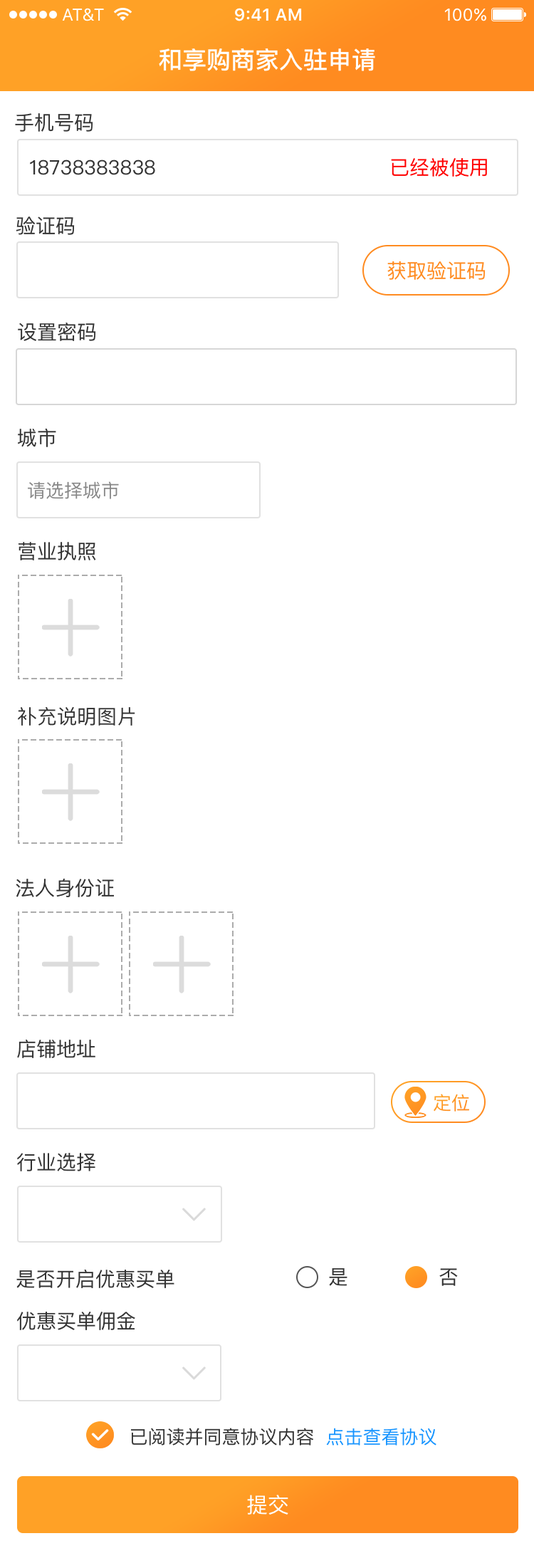
<style>
.page{position:relative;width:534px;height:1568px;background:#ffffff}
.page>*{position:absolute;margin:0}
.t1{font:24.2px "PingFangSC-Medium";color:#ffffff;text-transform:uppercase}
.t2{font:19.9px "PingFangSC-Regular";color:#333333;text-transform:uppercase}
.t3{font:19.9px "PingFangSC-Regular";color:#ff0101;text-transform:uppercase}
.t4{font:19.9px "PingFangSC-Regular";color:#ff8b20;text-transform:uppercase}
.t5{font:18.5px "PingFangSC-Regular";color:#888888;text-transform:uppercase}
.t6{font:18.5px "PingFangSC-Regular";color:#ff9723;text-transform:uppercase}
.t7{font:18.5px "PingFangSC-Regular";color:#333333;text-transform:uppercase}
.t8{font:18.5px "PingFangSC-Regular";color:#1694ff;text-transform:uppercase}
.t9{font:21.4px "PingFangSC-Regular";color:#ffffff;text-transform:uppercase}
</style>
<div class="page">
<p class="t1" style="left:159px;top:48px;width:216px;height:23px">和享购商家入驻申请</p>
<p class="t2" style="left:15px;top:113px;width:78px;height:19px">手机号码</p>
<p class="t2" style="left:30px;top:160px;width:125px;height:15px">18738383838</p>
<p class="t3" style="left:391px;top:158px;width:96px;height:19px">已经被使用</p>
<p class="t2" style="left:16px;top:216px;width:59px;height:19px">验证码</p>
<p class="t4" style="left:387px;top:261px;width:99px;height:19px">获取验证码</p>
<p class="t2" style="left:18px;top:323px;width:78px;height:18px">设置密码</p>
<p class="t2" style="left:18px;top:428px;width:38px;height:19px">城市</p>
<p class="t5" style="left:28px;top:481px;width:91px;height:18px">请选择城市</p>
<p class="t2" style="left:18px;top:542px;width:78px;height:18px">营业执照</p>
<p class="t2" style="left:18px;top:707px;width:117px;height:19px">补充说明图片</p>
<p class="t2" style="left:16px;top:878px;width:98px;height:19px">法人身份证</p>
<p class="t2" style="left:17px;top:1040px;width:78px;height:18px">店铺地址</p>
<p class="t6" style="left:434px;top:1094px;width:35px;height:18px">定位</p>
<p class="t2" style="left:17px;top:1153px;width:78px;height:18px">行业选择</p>
<p class="t2" style="left:16px;top:1269px;width:158px;height:19px">是否开启优惠买单</p>
<p class="t2" style="left:329px;top:1268px;width:18px;height:18px">是</p>
<p class="t2" style="left:439px;top:1268px;width:19px;height:18px">否</p>
<p class="t2" style="left:17px;top:1312px;width:118px;height:18px">优惠买单佣金</p>
<p class="t7" style="left:131px;top:1428px;width:182px;height:18px">已阅读并同意协议内容</p>
<p class="t8" style="left:326px;top:1428px;width:111px;height:18px">点击查看协议</p>
<p class="t9" style="left:247px;top:1495px;width:41px;height:20px">提交</p>
</div>
